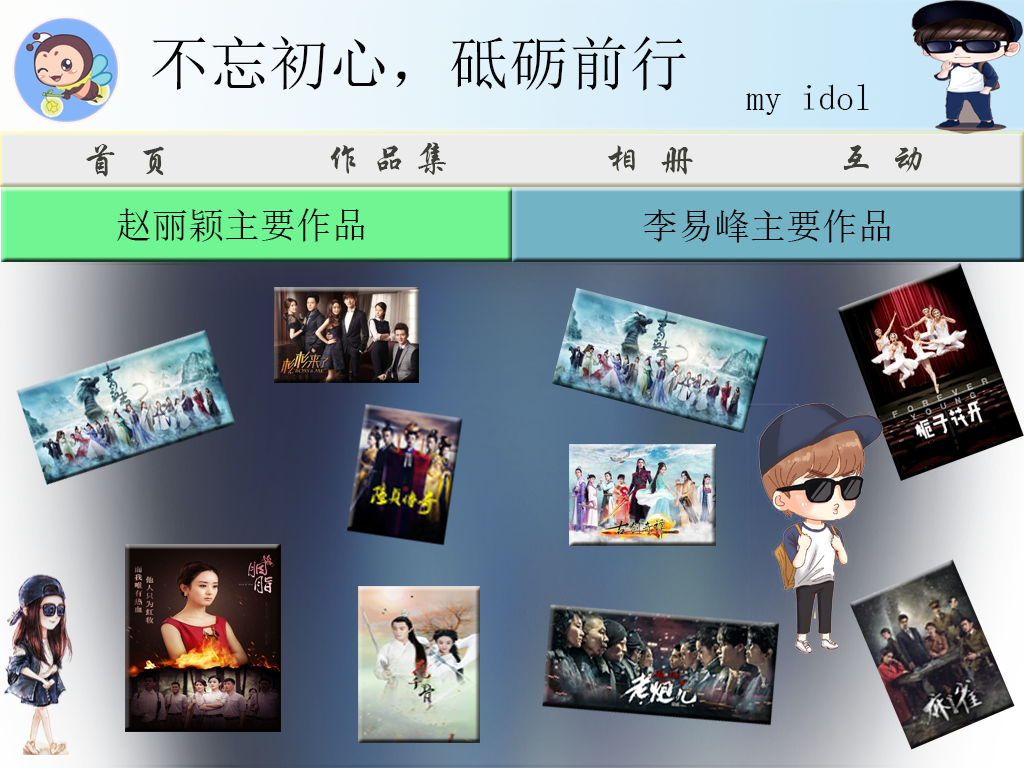
<style>
.page{position:relative;width:1024px;height:768px}
.page>*{position:absolute;margin:0}
.t1{font:60px "SimSun";color:#060606}
.t2{font:36px "SimSun";color:#060606}
.t3{font:36px "STXingkai";color:#3f3f3a}
</style>
<div class="page">
<p class="t1" style="left:152px;top:36px;width:534px;height:55px">不忘初心，砥砺前行</p>
<p class="t2" style="left:746px;top:84px;width:123px;height:31px">my idol</p>
<p class="t3" style="left:86px;top:144px;width:78px;height:33px">首  页</p>
<p class="t3" style="left:330px;top:142px;width:116px;height:33px">作 品 集</p>
<p class="t3" style="left:608px;top:145px;width:85px;height:30px">相  册</p>
<p class="t3" style="left:843px;top:145px;width:79px;height:28px">互  动</p>
<p class="t2" style="left:117px;top:208px;width:248px;height:34px">赵丽颖主要作品</p>
<p class="t2" style="left:643px;top:209px;width:248px;height:34px">李易峰主要作品</p>
</div>
